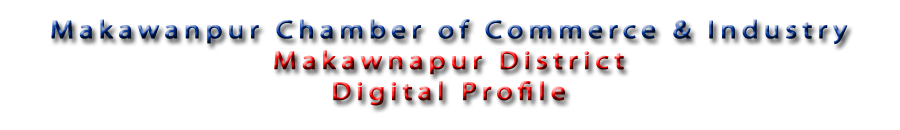
<style>
.page{position:relative;width:900px;height:130px;background:#ffffff}
.page>*{position:absolute;margin:0}
.t1{font:25.4px/30.8px "MyriadPro-Regular";letter-spacing:0.16em;font-weight:bold;scale:1.15 1}
</style>
<div class="page">
<p class="t1" style="left:51px;top:19px;width:797px;height:87px;text-align:center">Makawanpur Chamber of Commerce &amp; Industry<br>Makawnapur District<br>Digital Profile</p>
</div>
